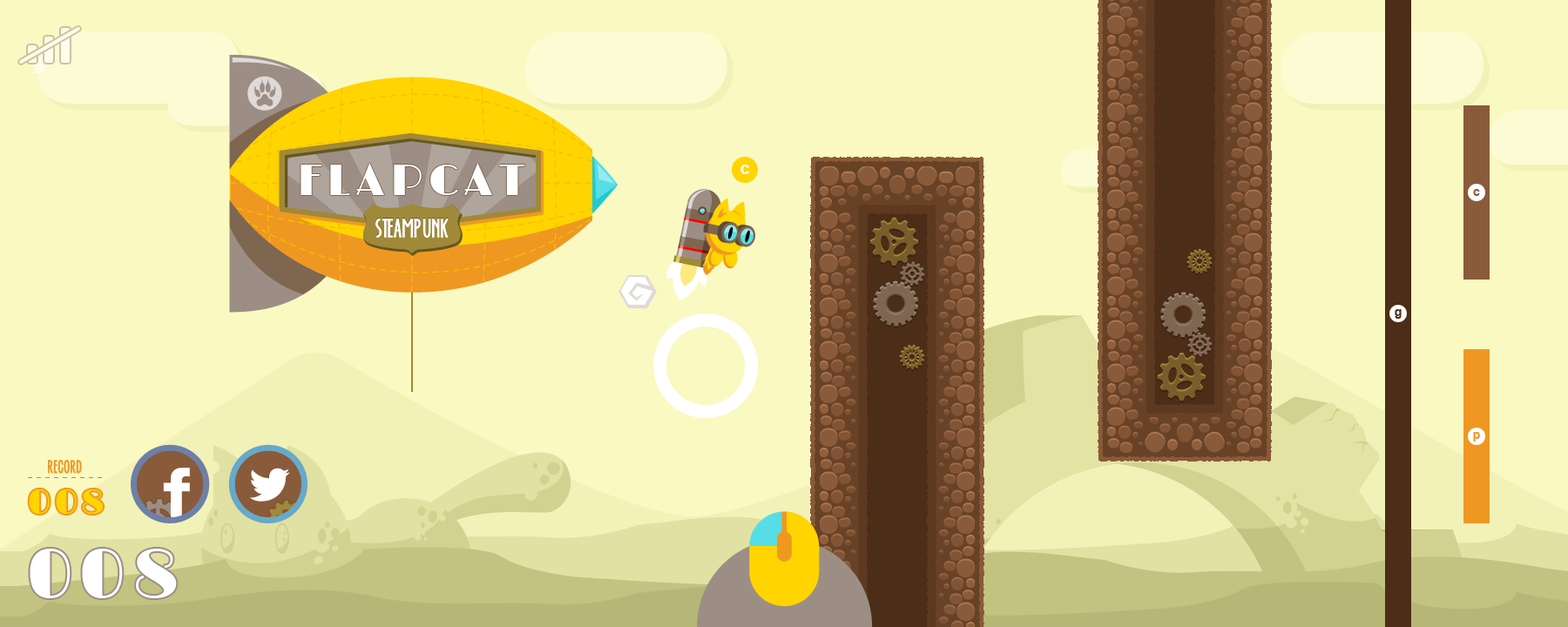
<style>
.page{position:relative;width:1568px;height:627px;background:#f9f9c1}
.page>*{position:absolute;margin:0}
.t1{font:43.6px "Limelight-Regular";letter-spacing:0.13em;color:#ffffff;text-transform:uppercase}
.t2{font:17.4px "Arial-BoldMT";color:#ffffff}
.t3{font:12.2px "Arial-BoldMT";color:#895b3a}
.t4{font:22.6px "EverAfter";letter-spacing:-0.02em;color:#ffffff;text-transform:uppercase;font-weight:bold}
.t5{font:12.2px "Arial-BoldMT";color:#4c2d18}
.t6{font:12.2px "Arial-BoldMT";color:#ef9821}
.t7{font:15.7px "EverAfter";color:#ef9821;text-transform:uppercase;font-weight:bold}
.t8{font:34.8px "Limelight-Regular";letter-spacing:0.1em;color:#ffd400;text-transform:uppercase}
.t9{font:69.7px "Limelight-Regular";letter-spacing:0.1em;color:#ffffff;text-transform:uppercase}
</style>
<div class="page">
<p class="t1" style="left:301px;top:163px;width:224px;height:32px">flapcat</p>
<p class="t2" style="left:740px;top:165px;width:10px;height:9px">c</p>
<p class="t3" style="left:1473px;top:189px;width:7px;height:7px">c</p>
<p class="t4" style="left:375px;top:218px;width:74px;height:20px">steampunk</p>
<p class="t5" style="left:1395px;top:309px;width:7px;height:10px">g</p>
<p class="t6" style="left:1473px;top:432px;width:7px;height:10px">p</p>
<p class="t7" style="left:48px;top:460px;width:34px;height:14px">record</p>
<p class="t8" style="left:29px;top:490px;width:75px;height:24px">008</p>
<p class="t9" style="left:30px;top:549px;width:147px;height:49px">008</p>
</div>
